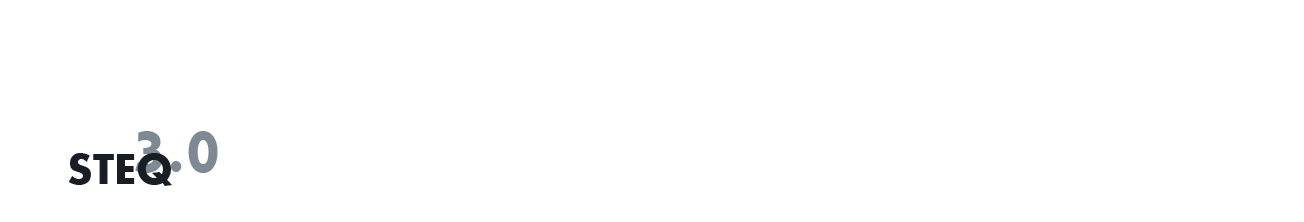
<style>
.page{position:relative;width:1304px;height:222px;background:#ffffff}
.page>*{position:absolute;margin:0}
.t1{font:87px "Aharoni-Bold";color:#7f8993}
.t2{font:45px "Aharoni-Bold";color:#181e23}
</style>
<div class="page">
<p class="t1" style="left:135px;top:131px;width:83px;height:42px">3.0</p>
<p class="t2" style="left:68px;top:153px;width:104px;height:33px">STEQ</p>
</div>
